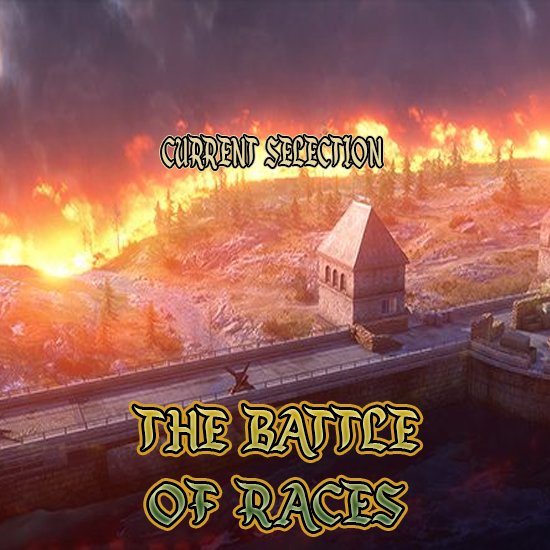
<style>
.page{position:relative;width:550px;height:550px}
.page>*{position:absolute;margin:0}
.t1{font:44.8px "EnchantedLand";color:#e4d7a3;scale:0.6 1}
.t2{font:61.9px "EnchantedLand"}
</style>
<div class="page">
<p class="t1" style="left:162px;top:135px;width:220px;height:34px">CURRENT   SELECTION</p>
<p class="t1" style="left:162px;top:135px;width:220px;height:34px">CURRENT   SELECTION</p>
<p class="t2" style="left:134px;top:405px;width:284px;height:126px;text-align:center">THE   BATTLE<br>OF    RACES</p>
<p class="t2" style="left:134px;top:405px;width:284px;height:126px;text-align:center">THE   BATTLE<br>OF    RACES</p>
</div>
